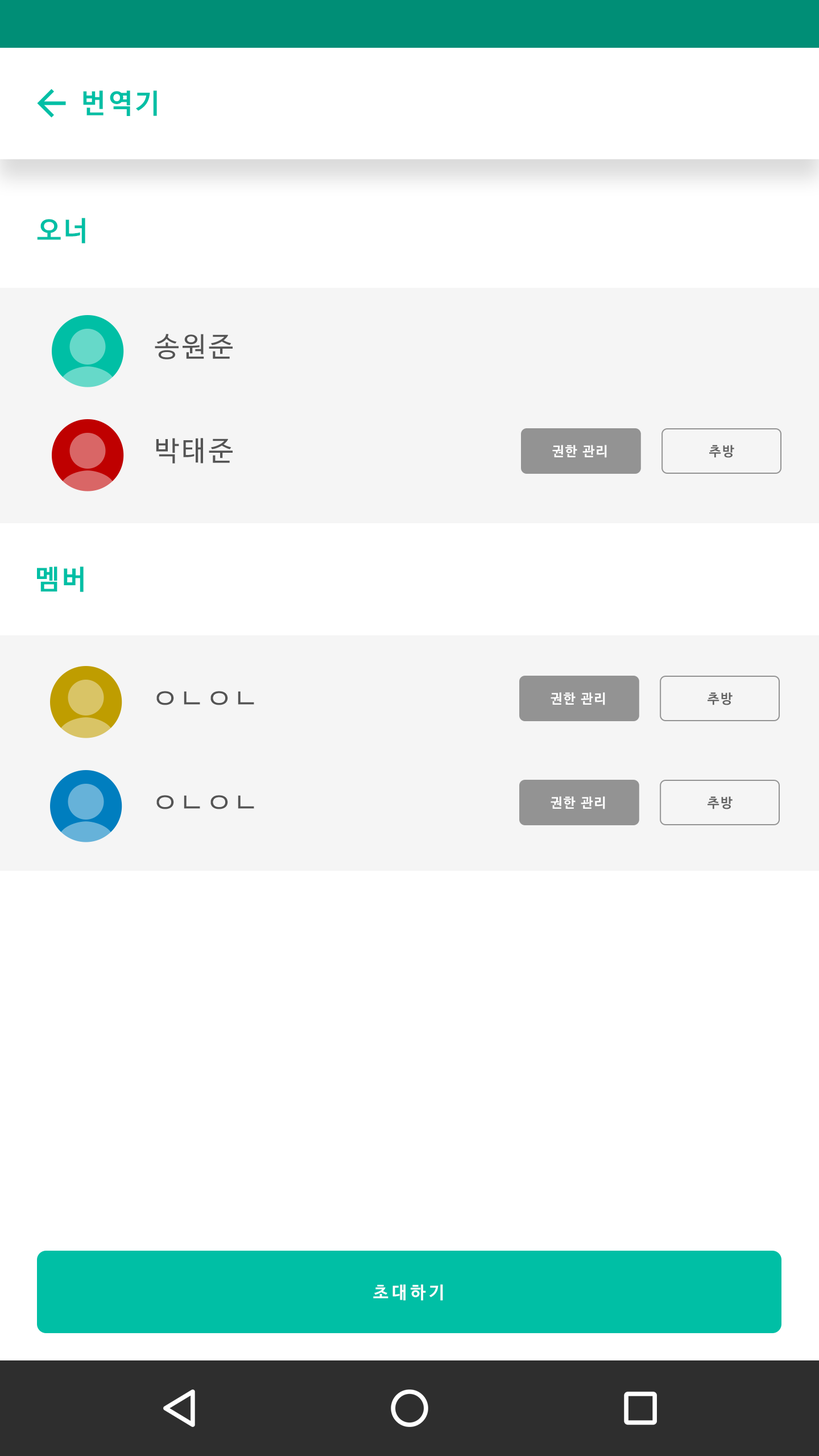
<style>
.page{position:relative;width:819px;height:1456px;background:#ffffff}
.page>*{position:absolute;margin:0}
.t1{font:27.3px "NanumBarunGothicBold";letter-spacing:0.1em;color:#00bfa5}
.t2{font:27.3px "NanumBarunGothic";letter-spacing:0.1em;color:#545454}
.t3{font:13.4px "NanumBarunGothicBold";letter-spacing:0.1em;color:#ffffff}
.t4{font:13.4px "NanumBarunGothicBold";letter-spacing:0.1em;color:#626262}
.t5{font:17.1px "NanumBarunGothicBold";letter-spacing:0.2em;color:#ffffff}
</style>
<div class="page">
<p class="t1" style="left:83px;top:90px;width:74px;height:26px">번역기</p>
<p class="t1" style="left:37px;top:218px;width:48px;height:25px">오너</p>
<p class="t2" style="left:155px;top:334px;width:78px;height:25px">송원준</p>
<p class="t2" style="left:156px;top:438px;width:77px;height:26px">박태준</p>
<p class="t3" style="left:552px;top:445px;width:55px;height:13px">권한 관리</p>
<p class="t4" style="left:709px;top:445px;width:25px;height:13px">추방</p>
<p class="t1" style="left:37px;top:566px;width:47px;height:26px">멤버</p>
<p class="t2" style="left:156px;top:691px;width:98px;height:14px">ㅇㄴㅇㄴ</p>
<p class="t3" style="left:551px;top:692px;width:54px;height:13px">권한 관리</p>
<p class="t4" style="left:708px;top:692px;width:25px;height:13px">추방</p>
<p class="t2" style="left:156px;top:795px;width:98px;height:14px">ㅇㄴㅇㄴ</p>
<p class="t3" style="left:551px;top:796px;width:54px;height:13px">권한 관리</p>
<p class="t4" style="left:708px;top:796px;width:25px;height:13px">추방</p>
<p class="t5" style="left:373px;top:1284px;width:70px;height:17px">초대하기</p>
</div>
